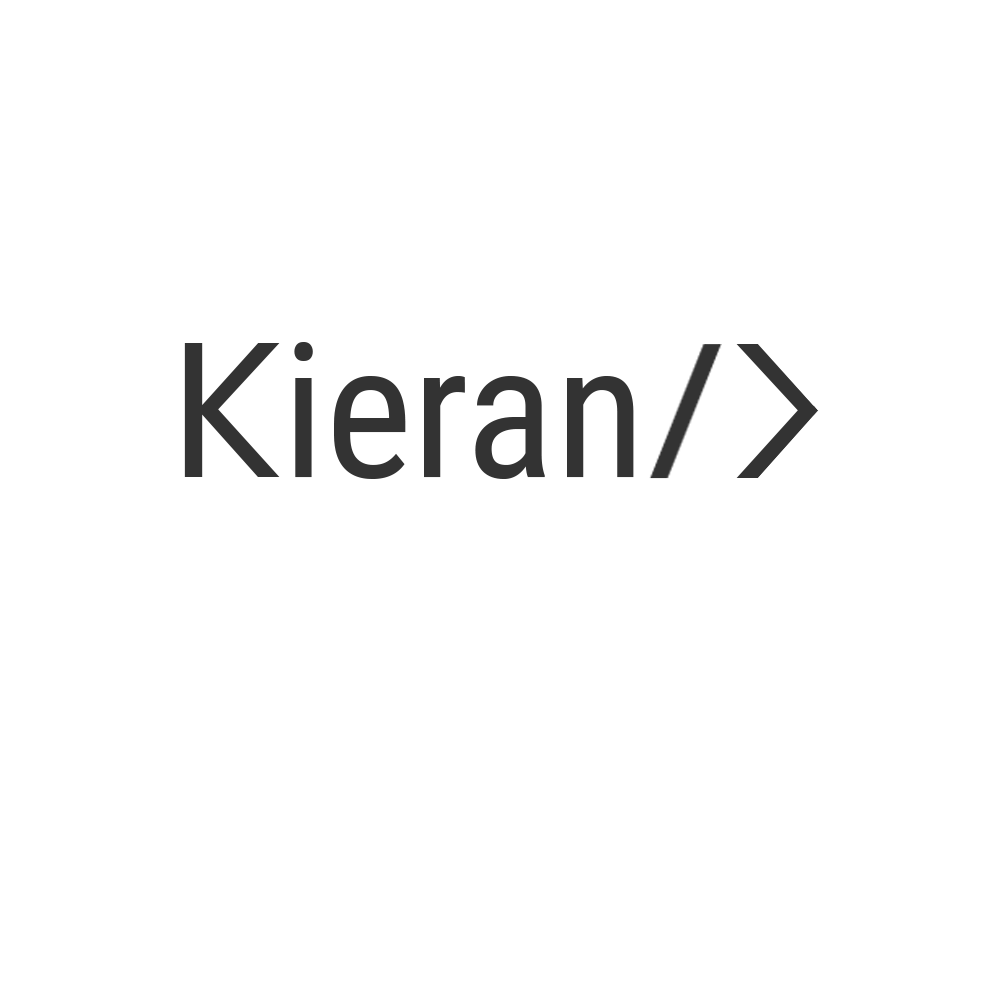
<style>
.page{position:relative;width:1000px;height:1000px;background:#ffffff}
.page>*{position:absolute;margin:0}
.t1{font:187px "RobotoCondensed-Regular";color:#333333}
</style>
<div class="page">
<p class="t1" style="left:294px;top:342px;width:340px;height:137px">ieran</p>
</div>
